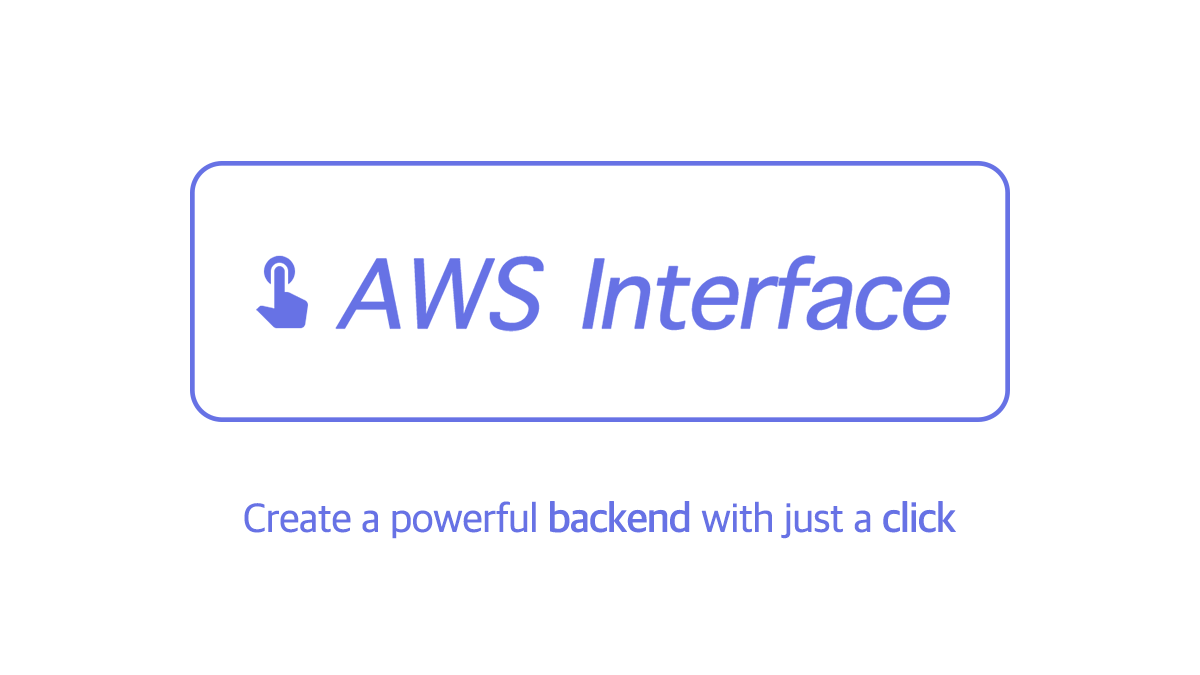
<style>
.page{position:relative;width:1200px;height:675px;background:#ffffff}
.page>*{position:absolute;margin:0}
.t1{font:41.7px "AppleSDGothicNeo-Regular";letter-spacing:-0.05em;color:#6772e5;font-weight:bold}
.t2{font:41.7px "AppleSDGothicNeo-SemiBold";letter-spacing:-0.05em;color:#6772e5;font-weight:bold}
</style>
<div class="page">
<p class="t1" style="left:244px;top:501px;width:712px;height:38px">Create a powerful <span class="t2">backend </span>with just a <span class="t2">click</span></p>
</div>
